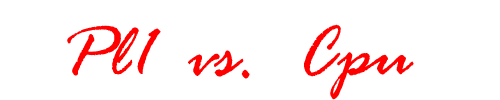
<style>
.page{position:relative;width:500px;height:100px;background:#ffffff}
.page>*{position:absolute;margin:0}
.t1{font:78px "RageItalic";color:#ff0000}
</style>
<div class="page">
<p class="t1" style="left:67px;top:24px;width:347px;height:76px">Pl1  vs.  Cpu</p>
</div>
